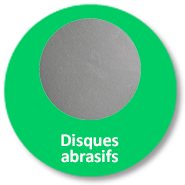
<style>
.page{position:relative;width:185px;height:185px;background:#00cc66}
.page>*{position:absolute;margin:0}
.t1{font:18px/16px "Calibri-Bold";color:#ffffff}
</style>
<div class="page">
<p class="t1" style="left:61px;top:134px;width:58px;height:29px;text-align:center">Disques  <br>abrasifs</p>
</div>
